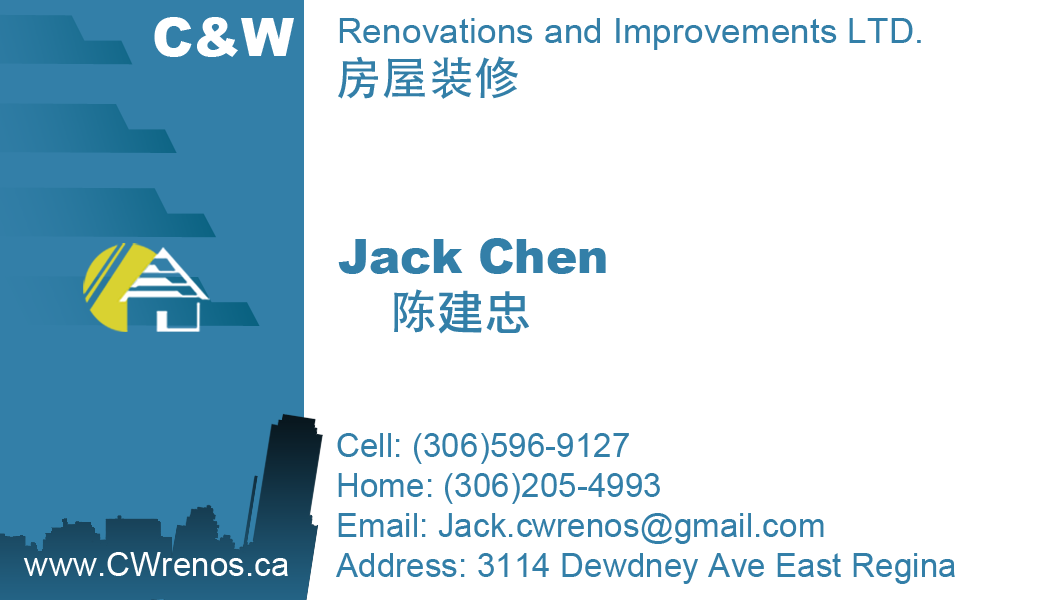
<style>
.page{position:relative;width:1050px;height:600px;background:#ffffff}
.page>*{position:absolute;margin:0}
.t1{font:53.2px "Arial-Black";color:#ffffff}
.t2{font:35.5px "ArialMT";color:#337fa8}
.t3{font:45.8px "AdobeHeitiStd-Regular";color:#337fa8}
.t4{font:46.7px "Arial-Black";color:#337fa8}
.t5{font:46.7px "AdobeHeitiStd-Regular";color:#337fa8}
.t6{font:46.7px "LiHeiPro";color:#337fa8}
.t7{font:33.3px "ArialMT";color:#337fa8}
.t8{font:33.3px "ArialMT";color:#ffffff}
</style>
<div class="page">
<p class="t1" style="left:154px;top:17px;width:140px;height:40px">C&amp;W</p>
<p class="t2" style="left:339px;top:18px;width:582px;height:32px">Renovations and Improvements LTD.</p>
<p class="t3" style="left:338px;top:56px;width:180px;height:43px">房屋装修</p>
<p class="t4" style="left:338px;top:238px;width:268px;height:96px">Jack Chen <br><span class="t5">     陈</span><span class="t6">建忠</span></p>
<p class="t7" style="left:336px;top:433px;width:619px;height:151px">Cell: (306)596-9127<br>Home: (306)205-4993<br>Email: Jack.cwrenos@gmail.com<br>Address: 3114 Dewdney Ave East Regina</p>
<p class="t8" style="left:23px;top:552px;width:265px;height:24px">www.CWrenos.ca</p>
</div>
